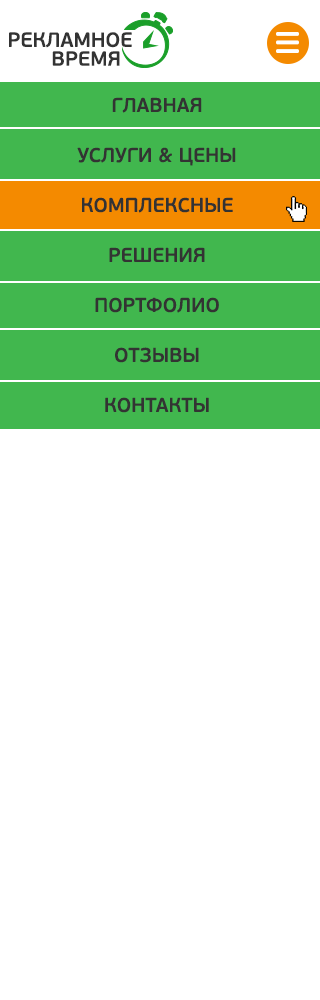
<style>
.page{position:relative;width:320px;height:1000px;background:#ffffff}
.page>*{position:absolute;margin:0}
.t1{font:20.4px/18.9px "PFBeauSansPro-SemiBold";color:#333333;text-transform:uppercase}
.t2{font:20px/50px "PFBeauSansPro-SemiBold";color:#333333;text-transform:uppercase}
</style>
<div class="page">
<p class="t1" style="left:9px;top:32px;width:123px;height:34px;text-align:right">РЕКЛАМНОЕ<br>ВРЕМЯ</p>
<p class="t2" style="left:77px;top:97px;width:159px;height:316px;text-align:center">ГЛАВНАЯ<br>УСЛУГИ &amp; ЦЕНЫ<br>КОМПЛЕКСНЫЕ<br>РЕШЕНИЯ<br>ПОРТФОЛИО<br>ОТЗЫВЫ<br>КОНТАКТЫ</p>
</div>
